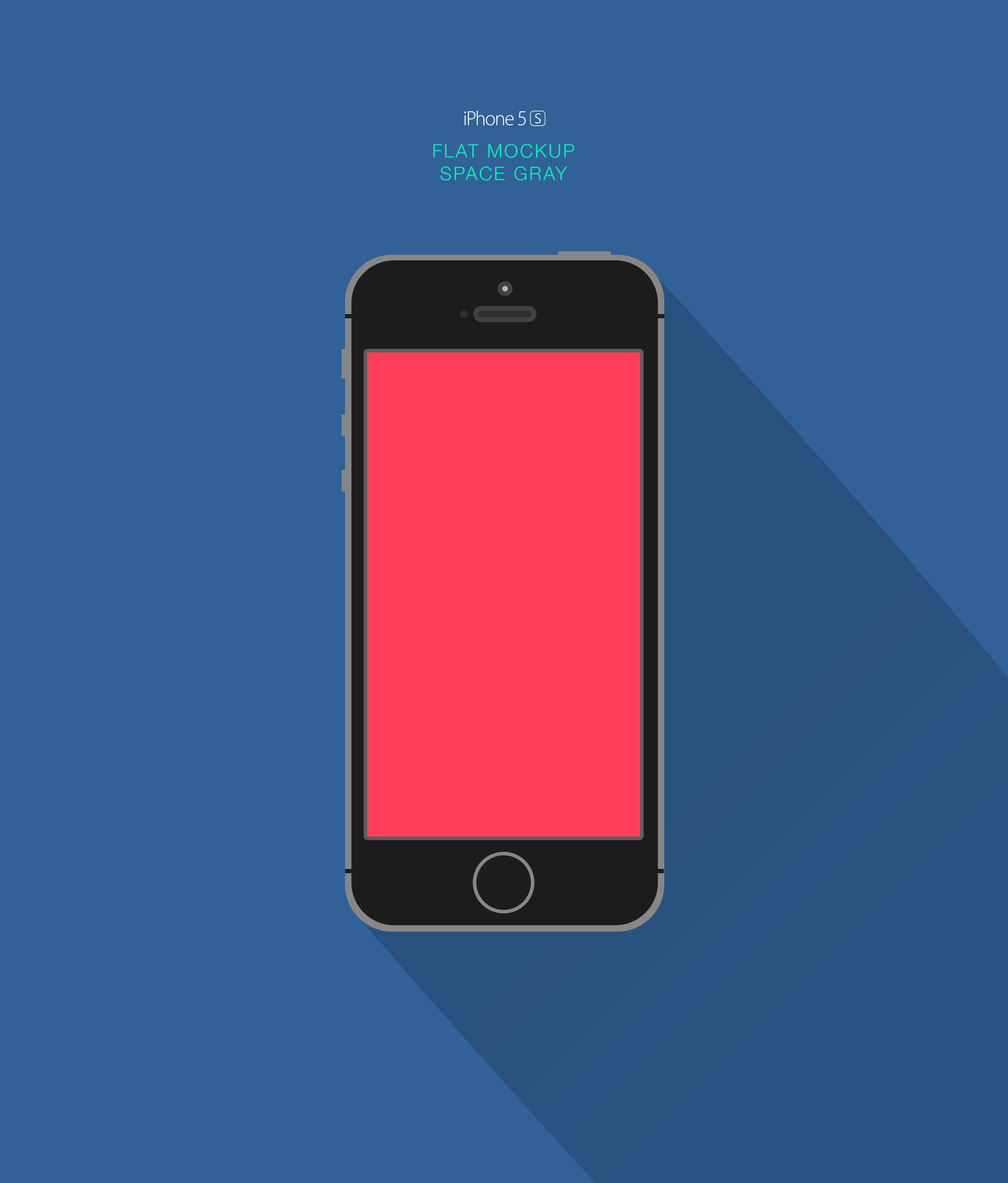
<style>
.page{position:relative;width:1008px;height:1183px;background:#316197}
.page>*{position:absolute;margin:0}
.t1{font:18.8px "HelveticaNeue-Light";letter-spacing:0.1em;color:#00f2bc;text-transform:uppercase}
</style>
<div class="page">
<p class="t1" style="left:433px;top:144px;width:141px;height:36px;text-align:center">Flat mockup<br>space gray</p>
</div>
